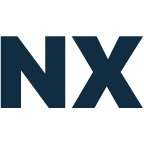
<style>
.page{position:relative;width:144px;height:144px;background:#ffffff}
.page>*{position:absolute;margin:0}
.t1{font:101.6px "SFUIDisplay-Black";color:#102d42}
</style>
<div class="page">
<p class="t1" style="left:0px;top:36px;width:143px;height:72px">NX</p>
</div>
